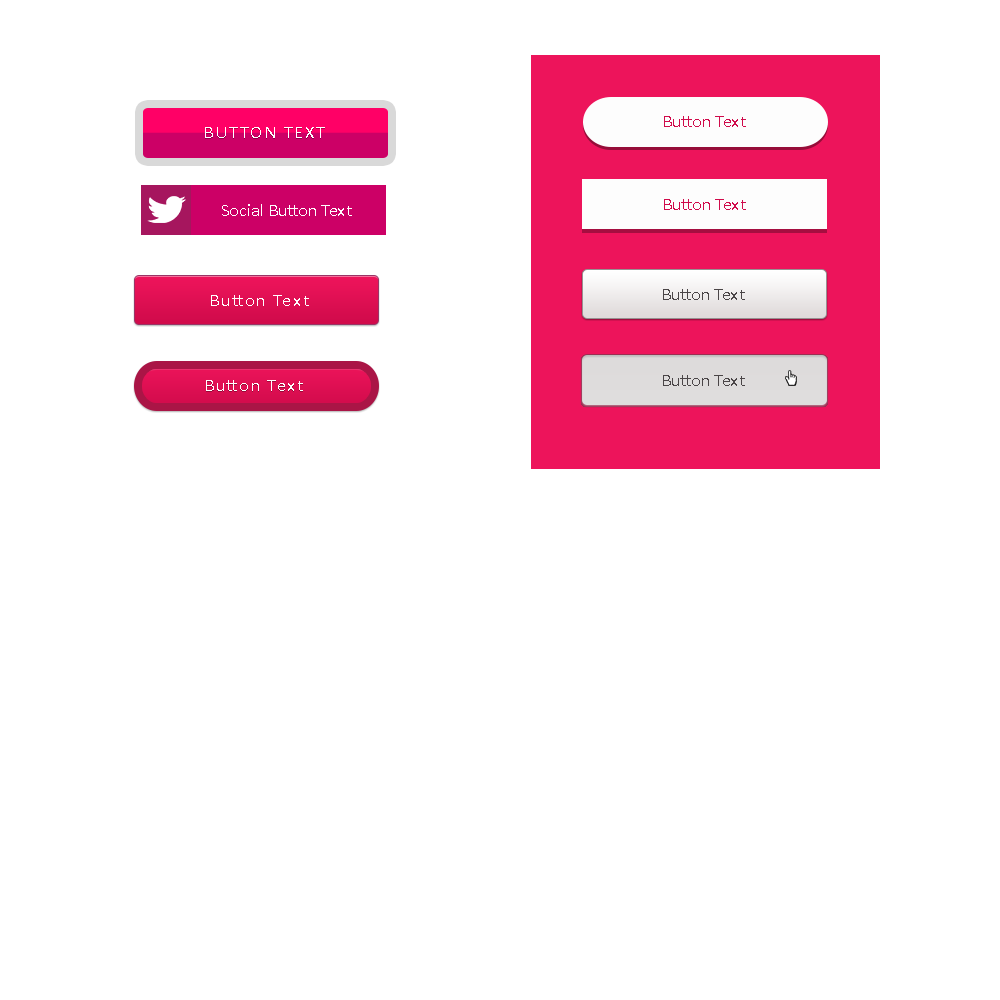
<style>
.page{position:relative;width:1000px;height:1000px;background:#ffffff}
.page>*{position:absolute;margin:0}
.t1{font:18px "Calibri";color:#d00b4b}
.t2{font:18px "Calibri";letter-spacing:0.1em;color:#ffffff}
.t3{font:18px "Calibri";color:#fdfdfd}
.t4{font:18px "Calibri";color:#4a4547}
.t5{font:18px "Calibri";letter-spacing:0.1em;color:#fefefe}
</style>
<div class="page">
<p class="t1" style="left:664px;top:116px;width:82px;height:11px">Button Text</p>
<p class="t2" style="left:205px;top:127px;width:120px;height:11px">BUTTON TEXT</p>
<p class="t3" style="left:222px;top:204px;width:130px;height:12px">Social Button Text</p>
<p class="t1" style="left:664px;top:199px;width:82px;height:11px">Button Text</p>
<p class="t4" style="left:663px;top:289px;width:82px;height:11px">Button Text</p>
<p class="t5" style="left:211px;top:295px;width:98px;height:11px">Button Text</p>
<p class="t4" style="left:663px;top:375px;width:82px;height:11px">Button Text</p>
<p class="t2" style="left:206px;top:380px;width:97px;height:11px">Button Text</p>
</div>
